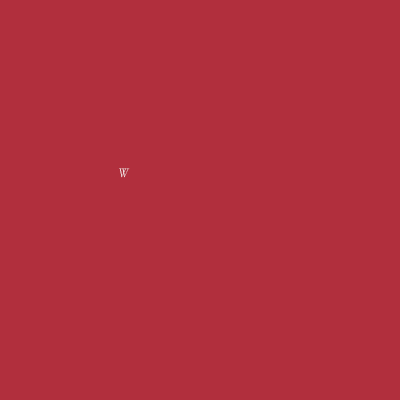
<style>
.page{position:relative;width:400px;height:400px;background:#b12f3d}
.page>*{position:absolute;margin:0}
.t1{font:14px "AGReverenceObliqueMedium"}
</style>
<div class="page">
<p class="t1" style="left:119px;top:168px;width:11px;height:10px">W</p>
</div>
